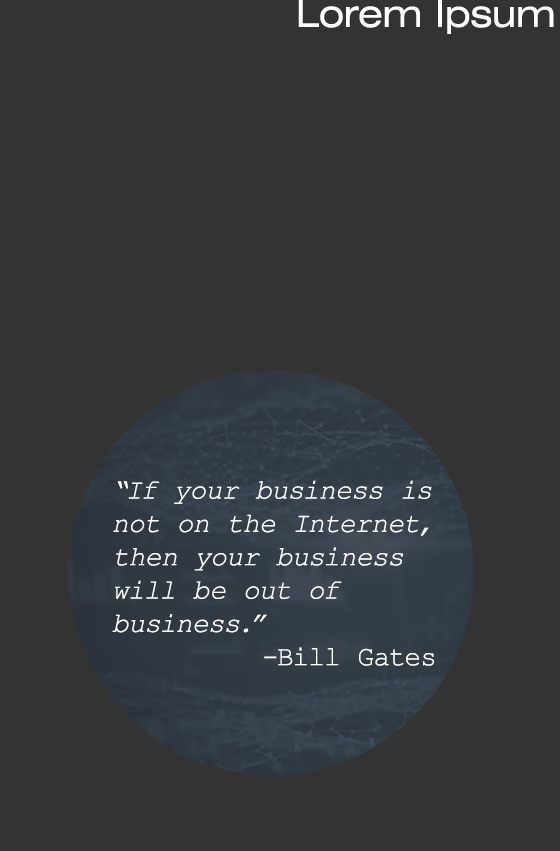
<style>
.page{position:relative;width:560px;height:851px;background:#333333}
.page>*{position:absolute;margin:0}
.t1{font:37.2px "Swiss721BT-RomanExtended";color:#ffffff}
.t2{font:27.8px "CourierNewPS-ItalicMT";color:#ffffff}
.t3{font:27.8px "CourierNewPSMT";color:#ffffff}
</style>
<div class="page">
<p class="t1" style="left:298px;top:0px;width:256px;height:34px">Lorem Ipsum</p>
<p class="t2" style="left:112px;top:480px;width:323px;height:186px">“If your business is not on the Internet, then your business will be out of business.” <br><span class="t3">         -Bill Gates</span></p>
</div>
